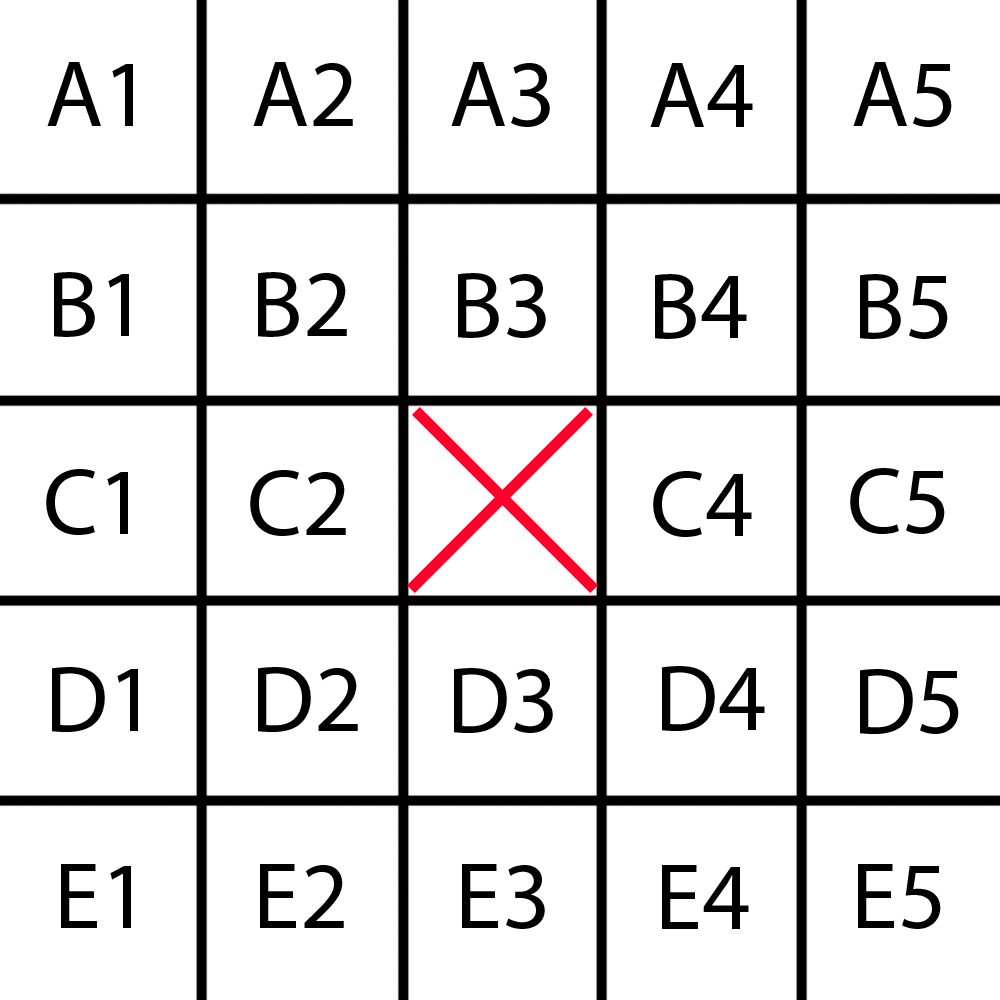
<style>
.page{position:relative;width:1000px;height:1000px;background:#ffffff}
.page>*{position:absolute;margin:0}
.t1{font:95px "MyriadPro-Regular";color:#000000}
</style>
<div class="page">
<p class="t1" style="left:47px;top:62px;width:86px;height:64px">A1</p>
<p class="t1" style="left:253px;top:62px;width:100px;height:64px">A2</p>
<p class="t1" style="left:451px;top:62px;width:99px;height:65px">A3</p>
<p class="t1" style="left:650px;top:63px;width:103px;height:64px">A4</p>
<p class="t1" style="left:54px;top:272px;width:75px;height:65px">B1</p>
<p class="t1" style="left:258px;top:272px;width:89px;height:65px">B2</p>
<p class="t1" style="left:458px;top:273px;width:88px;height:65px">B3</p>
<p class="t1" style="left:655px;top:274px;width:92px;height:65px">B4</p>
<p class="t1" style="left:860px;top:274px;width:88px;height:65px">B5</p>
<p class="t1" style="left:46px;top:469px;width:82px;height:66px">C1</p>
<p class="t1" style="left:250px;top:470px;width:96px;height:66px">C2</p>
<p class="t1" style="left:653px;top:471px;width:99px;height:66px">C4</p>
<p class="t1" style="left:850px;top:468px;width:95px;height:66px">C5</p>
<p class="t1" style="left:52px;top:667px;width:86px;height:65px">D1</p>
<p class="t1" style="left:258px;top:667px;width:100px;height:65px">D2</p>
<p class="t1" style="left:454px;top:668px;width:99px;height:65px">D3</p>
<p class="t1" style="left:662px;top:666px;width:103px;height:65px">D4</p>
<p class="t1" style="left:860px;top:669px;width:99px;height:65px">D5</p>
<p class="t1" style="left:61px;top:864px;width:70px;height:64px">E1</p>
<p class="t1" style="left:260px;top:864px;width:84px;height:64px">E2</p>
<p class="t1" style="left:462px;top:864px;width:83px;height:65px">E3</p>
<p class="t1" style="left:662px;top:865px;width:87px;height:64px">E4</p>
<p class="t1" style="left:858px;top:864px;width:83px;height:65px">E5</p>
</div>
